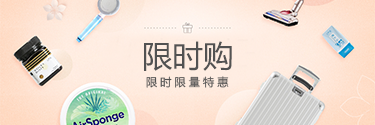
<style>
.page{position:relative;width:375px;height:125px}
.page>*{position:absolute;margin:0}
.t1{font:30.6px "MicrosoftYaHei";color:#525252}
.t2{font:11.2px "MicrosoftYaHei";color:#525252}
</style>
<div class="page">
<p class="t1" style="left:144px;top:41px;width:88px;height:30px">限时购</p>
<p class="t2" style="left:146px;top:76px;width:83px;height:12px">限 时 限 量 特 惠</p>
</div>
